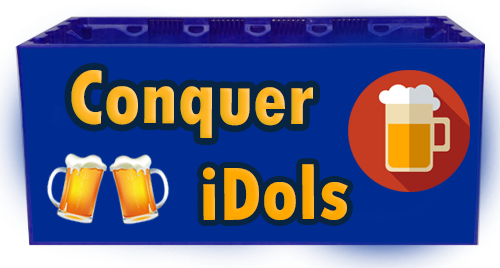
<style>
.page{position:relative;width:500px;height:268px;background:#002c92}
.page>*{position:absolute;margin:0}
.t1{font:79.6px "TwCenMT-CondensedExtraBold"}
.t2{font:79.6px "TwCenMT-CondensedExtraBold";color:#ffa800}
</style>
<div class="page">
<p class="t1" style="left:71px;top:70px;width:242px;height:68px">Conquer</p>
<p class="t2" style="left:203px;top:164px;width:145px;height:57px">iDols</p>
</div>
